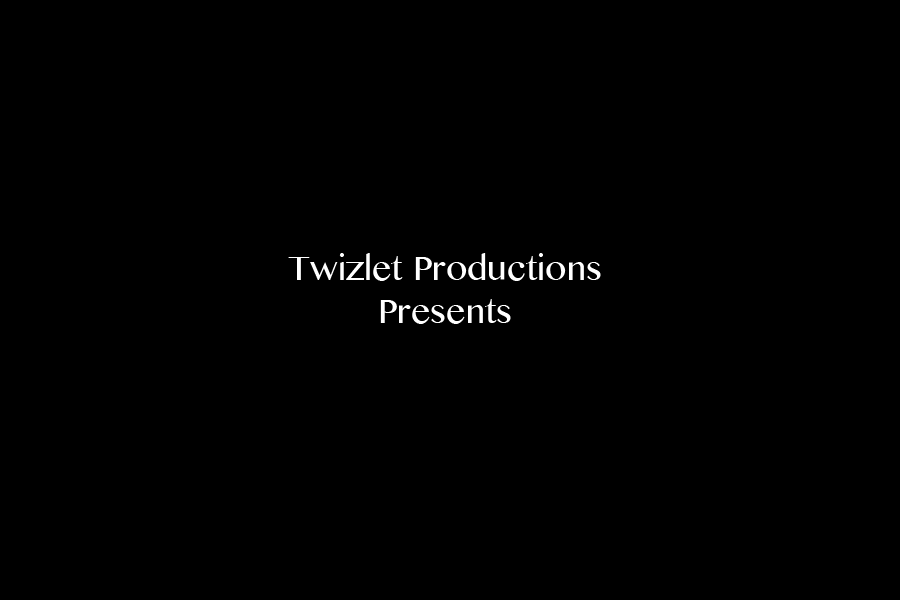
<style>
.page{position:relative;width:900px;height:600px;background:#000000}
.page>*{position:absolute;margin:0}
.t1{font:36px "TeluguMN";color:#ffffff}
</style>
<div class="page">
<p class="t1" style="left:288px;top:253px;width:313px;height:71px;text-align:center">Twizlet Productions<br>Presents</p>
</div>
